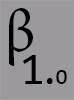
<style>
.page{position:relative;width:74px;height:100px;background:#9b999e}
.page>*{position:absolute;margin:0}
.t1{font:60px "MinionPro-Regular";color:#000000}
.t2{font:41.7px "Bitter-Regular";color:#000000}
.t3{font:44.4px "Bitter-Regular";color:#000000}
.t4{font:20px "Bitter-Regular";color:#000000}
</style>
<div class="page">
<p class="t1" style="left:9px;top:8px;width:24px;height:58px">β</p>
<p class="t2" style="left:22px;top:55px;width:45px;height:29px">1<span class="t3">.</span><span class="t4">0</span></p>
</div>
